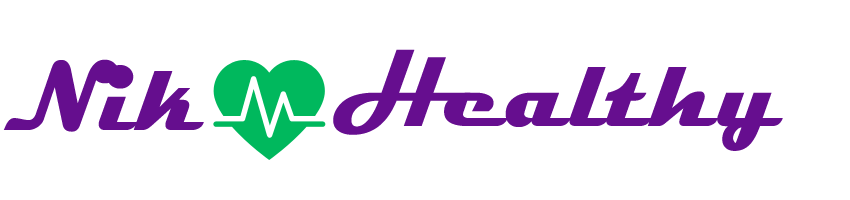
<style>
.page{position:relative;width:850px;height:200px;background:#ffffff}
.page>*{position:absolute;margin:0}
.t1{font:100px "Magneto-Bold";color:#660e8f}
.t2{font:100px "Magneto-Bold";color:#650e8e}
</style>
<div class="page">
<p class="t1" style="left:333px;top:49px;width:450px;height:102px">Healthy</p>
<p class="t2" style="left:3px;top:59px;width:201px;height:73px">Nik</p>
</div>
